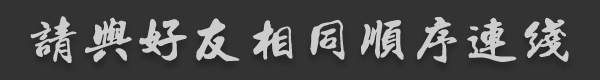
<style>
.page{position:relative;width:600px;height:80px;background:#333333}
.page>*{position:absolute;margin:0}
.t1{font:54.8px "SunYatsenHsingshu-";color:#cdcdcd}
</style>
<div class="page">
<p class="t1" style="left:30px;top:16px;width:539px;height:47px">请与好友相同顺序连线</p>
</div>
